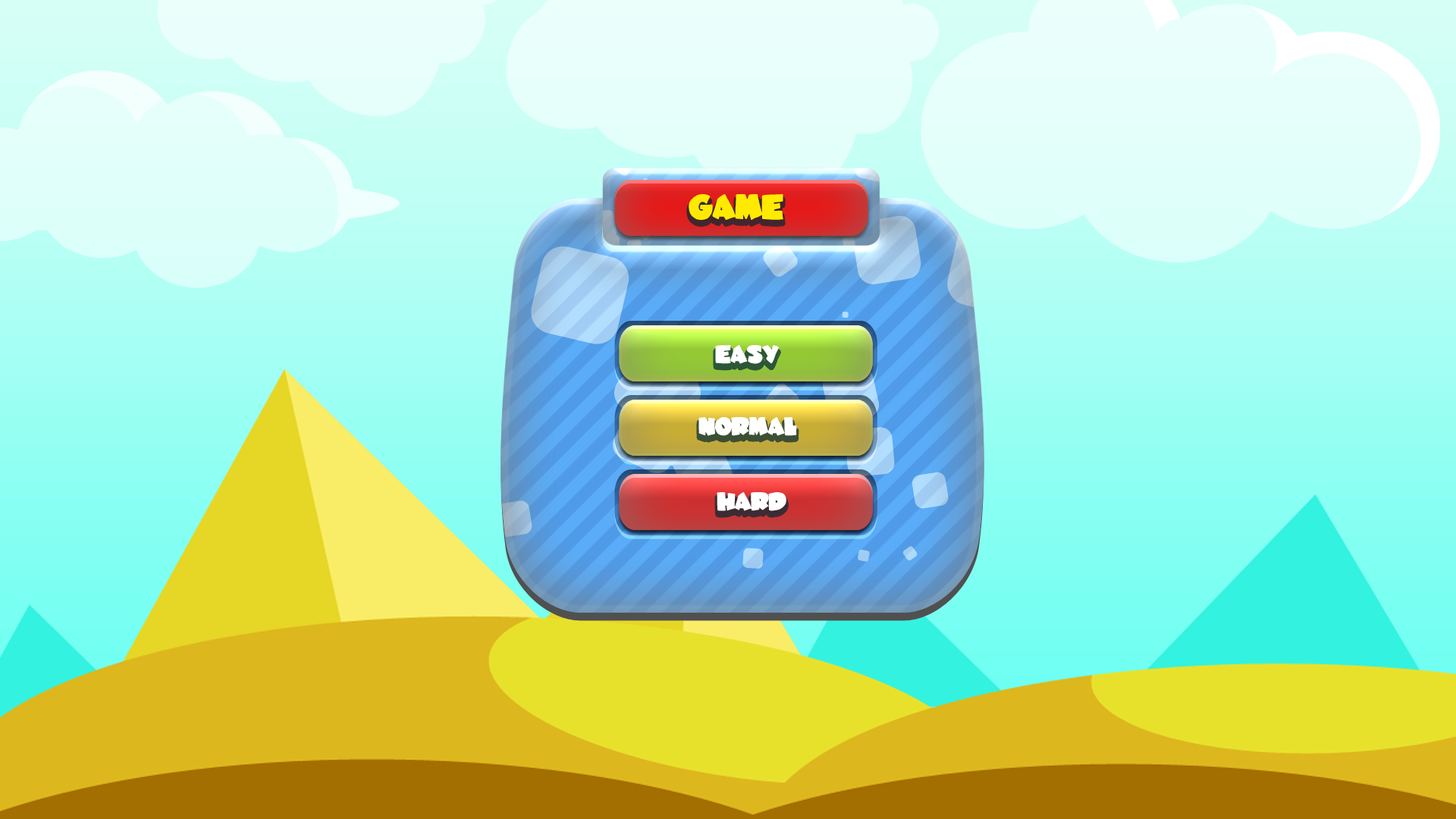
<style>
.page{position:relative;width:1456px;height:819px}
.page>*{position:absolute;margin:0}
.t1{font:25.8px "JuneBug";letter-spacing:-0.02em;color:#ffea00}
.t2{font:18.3px "JuneBug";letter-spacing:-0.02em;color:#ffffff}
</style>
<div class="page">
<p class="t1" style="left:689px;top:194px;width:94px;height:26px">GAME</p>
<p class="t2" style="left:715px;top:345px;width:64px;height:19px">EASY</p>
<p class="t2" style="left:698px;top:417px;width:99px;height:19px">NORMAL</p>
<p class="t2" style="left:717px;top:492px;width:69px;height:19px">HARD</p>
</div>
